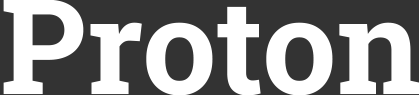
<style>
.page{position:relative;width:419px;height:95px;background:#333333}
.page>*{position:absolute;margin:0}
.t1{font:132.5px "RobotoSlab-Bold";color:#ffffff}
</style>
<div class="page">
<p class="t1" style="left:3px;top:0px;width:417px;height:96px">Proton</p>
</div>
